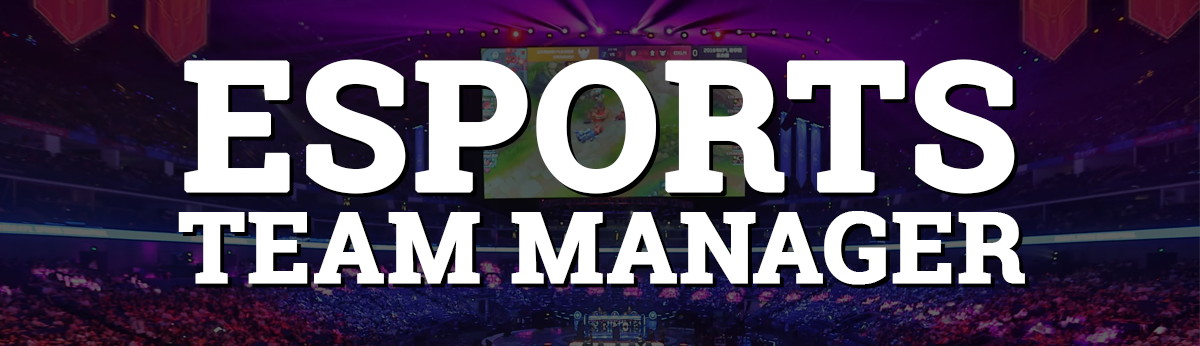
<style>
.page{position:relative;width:1200px;height:346px;background:#ffffff}
.page>*{position:absolute;margin:0}
.t1{font:99px/92px "RobotoSlab-Bold";color:#ffffff;text-transform:uppercase;font-weight:bold}
.t2{font:178px/92px "RobotoSlab-Bold";color:#ffffff;text-transform:uppercase;font-weight:bold}
</style>
<div class="page">
<p class="t1" style="left:178px;top:59px;width:847px;height:226px;text-align:center"><span class="t2">esports<br></span>team manager</p>
<p class="t1" style="left:182px;top:63px;width:847px;height:226px;text-align:center"><span class="t2">esports<br></span>team manager</p>
</div>
